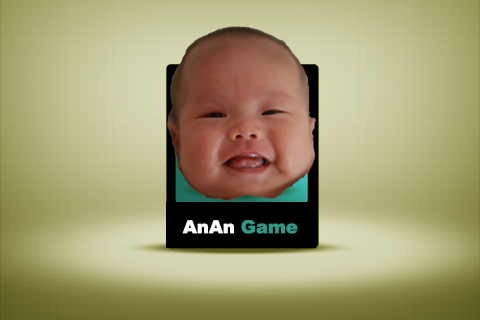
<style>
.page{position:relative;width:480px;height:320px}
.page>*{position:absolute;margin:0}
.t1{font:18px "Arial-Black";color:#fdfcfc}
.t2{font:18px "Arial-Black";color:#2f9888}
</style>
<div class="page">
<p class="t1" style="left:182px;top:220px;width:116px;height:14px">AnAn <span class="t2">Game</span></p>
</div>
